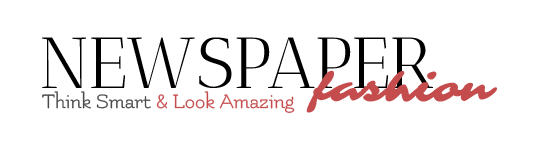
<style>
.page{position:relative;width:540px;height:150px;background:#ffffff}
.page>*{position:absolute;margin:0}
.t1{font:72px "AnticDidone-Regular";color:#000000}
.t2{font:40px "Sarina-Regular";color:#c44c4c}
.t3{font:22px "Flamenco-Regular";color:#c44c4c}
.t4{font:22px "Flamenco-Regular";color:#494949}
</style>
<div class="page">
<p class="t1" style="left:42px;top:37px;width:391px;height:51px">NEWSPAPER</p>
<p class="t2" style="left:306px;top:70px;width:191px;height:43px">fashion</p>
<p class="t3" style="left:42px;top:91px;width:253px;height:22px"><span class="t4">Think Smart </span>&amp; Look Amazing</p>
</div>
